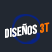
<style>
.page{position:relative;width:52px;height:52px;background:#222831}
.page>*{position:absolute;margin:0}
.t1{font:12.3px "BebasNeue-Regular";color:#ffffff;scale:1.07 1}
.t2{font:12.3px "BebasNeue-Regular";color:#ff7800;scale:1.07 1}
</style>
<div class="page">
<p class="t1" style="left:5px;top:22px;width:45px;height:16px;rotate:-9deg">diseños <span class="t2">3t</span></p>
</div>
